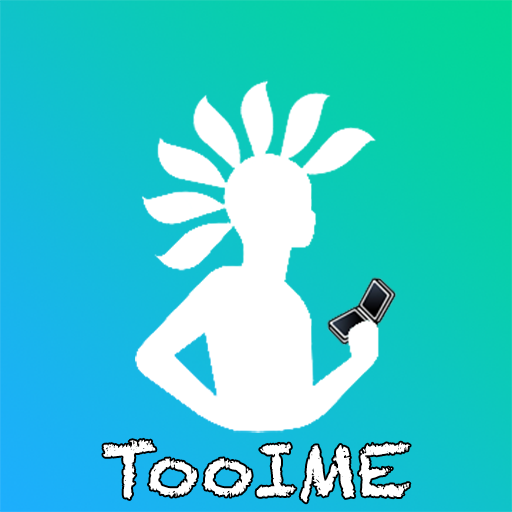
<style>
.page{position:relative;width:512px;height:512px}
.page>*{position:absolute;margin:0}
.t1{font:72px "Chalkduster";color:#ffffff}
</style>
<div class="page">
<p class="t1" style="left:103px;top:439px;width:307px;height:64px">TooIME</p>
</div>
